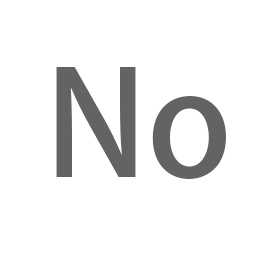
<style>
.page{position:relative;width:256px;height:256px;background:#ffffff}
.page>*{position:absolute;margin:0}
.t1{font:144px "AdobeHeitiStd-Regular";color:#646262}
</style>
<div class="page">
<p class="t1" style="left:56px;top:67px;width:170px;height:112px">No</p>
</div>
